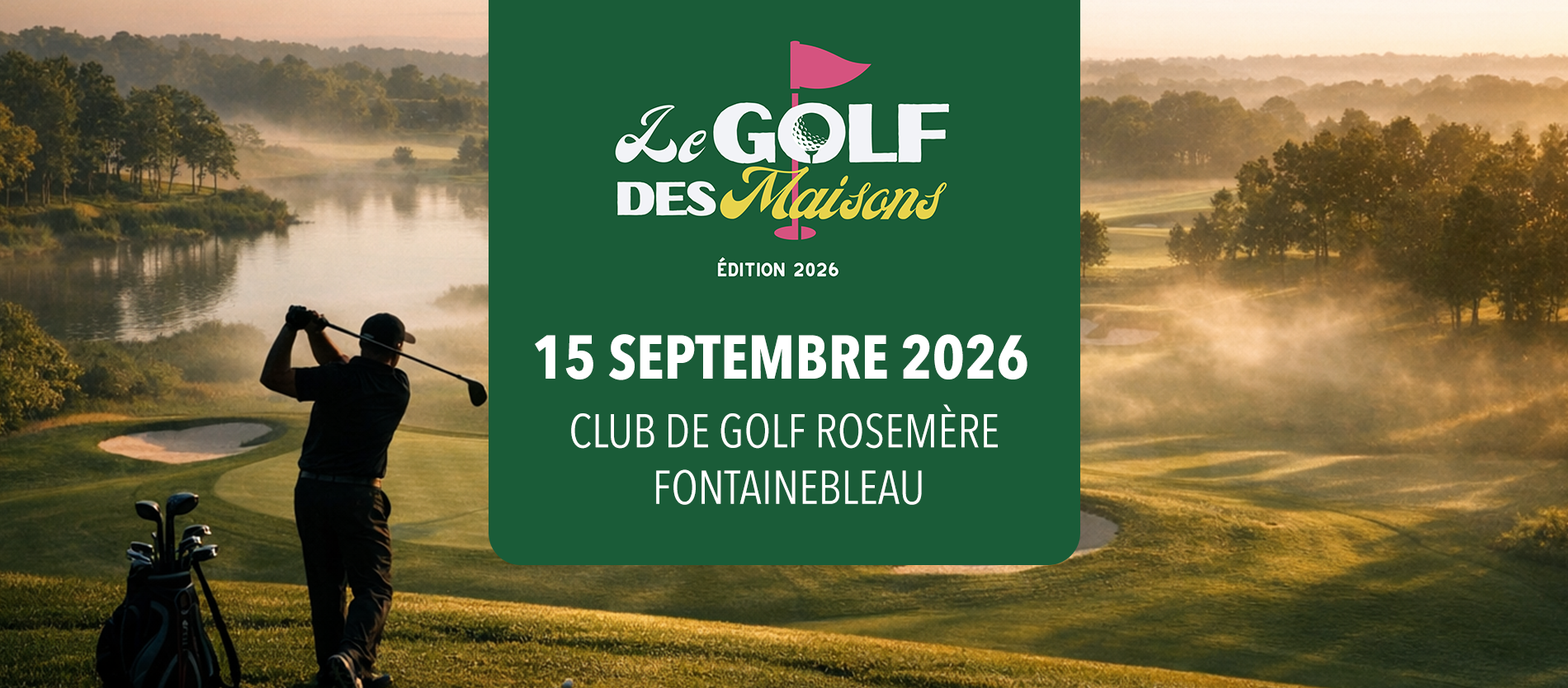
<style>
.page{position:relative;width:1568px;height:688px;background:#1a5c38}
.page>*{position:absolute;margin:0}
.t1{font:61px "AvenirNextCondensed-Bold";color:#ffffff}
.t2{font:47.1px "AvenirNextCondensed-Regular";color:#ffffff}
</style>
<div class="page">
<p class="t1" style="left:535px;top:334px;width:492px;height:46px">15 SEPTEMBRE 2026</p>
<p class="t2" style="left:571px;top:404px;width:427px;height:101px;text-align:center">CLUB DE GOLF ROSEMÈRE <br>FONTAINEBLEAU</p>
</div>
